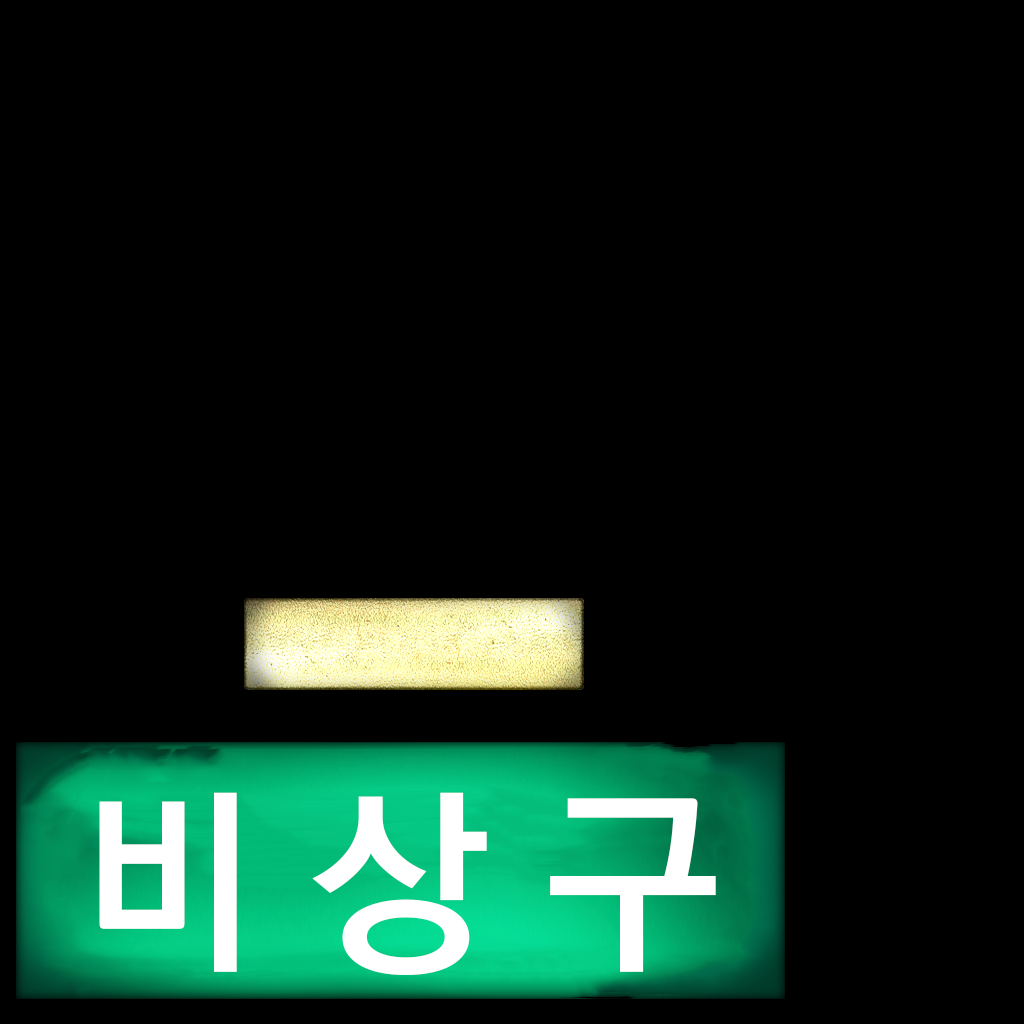
<style>
.page{position:relative;width:1024px;height:1024px;background:#000000}
.page>*{position:absolute;margin:0}
.t1{font:200px "KoPubDotumBold";color:#ffffff}
</style>
<div class="page">
<p class="t1" style="left:99px;top:792px;width:617px;height:183px">비 상 구</p>
</div>
